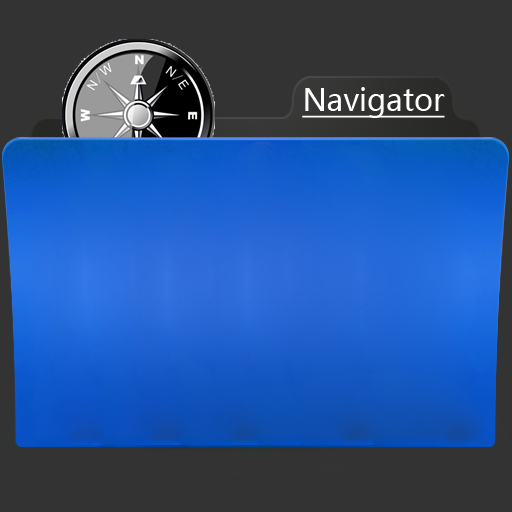
<style>
.page{position:relative;width:512px;height:512px;background:#333333}
.page>*{position:absolute;margin:0}
.t1{font:30px "MicrosoftYaHei";color:#ffffff;text-decoration:underline}
</style>
<div class="page">
<p class="t1" style="left:302px;top:87px;width:143px;height:31px">Navigator</p>
</div>
